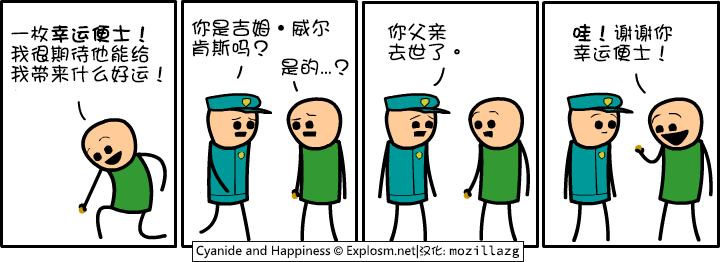
<style>
.page{position:relative;width:721px;height:262px;background:#ffffff}
.page>*{position:absolute;margin:0}
.t1{font:20px/20px "DFGirl";color:#000000}
.t2{font:20px/20px "DFGirl";color:#000000;font-weight:bold}
.t3{font:20px "DFGirl";color:#000000}
</style>
<div class="page">
<p class="t1" style="left:10px;top:24px;width:152px;height:59px">一枚<span class="t2">幸运便士！<br></span>我很期待他能给<br>我带来什么好运！</p>
<p class="t1" style="left:191px;top:19px;width:139px;height:38px">你是吉姆·威尔<br>肯斯吗？</p>
<p class="t1" style="left:387px;top:22px;width:73px;height:39px">你父亲<br>去世了。</p>
<p class="t1" style="left:573px;top:23px;width:99px;height:39px"><span class="t2">哇！</span>谢谢你<br>幸运便士！</p>
<p class="t3" style="left:281px;top:58px;width:68px;height:18px">是的...？</p>
</div>
